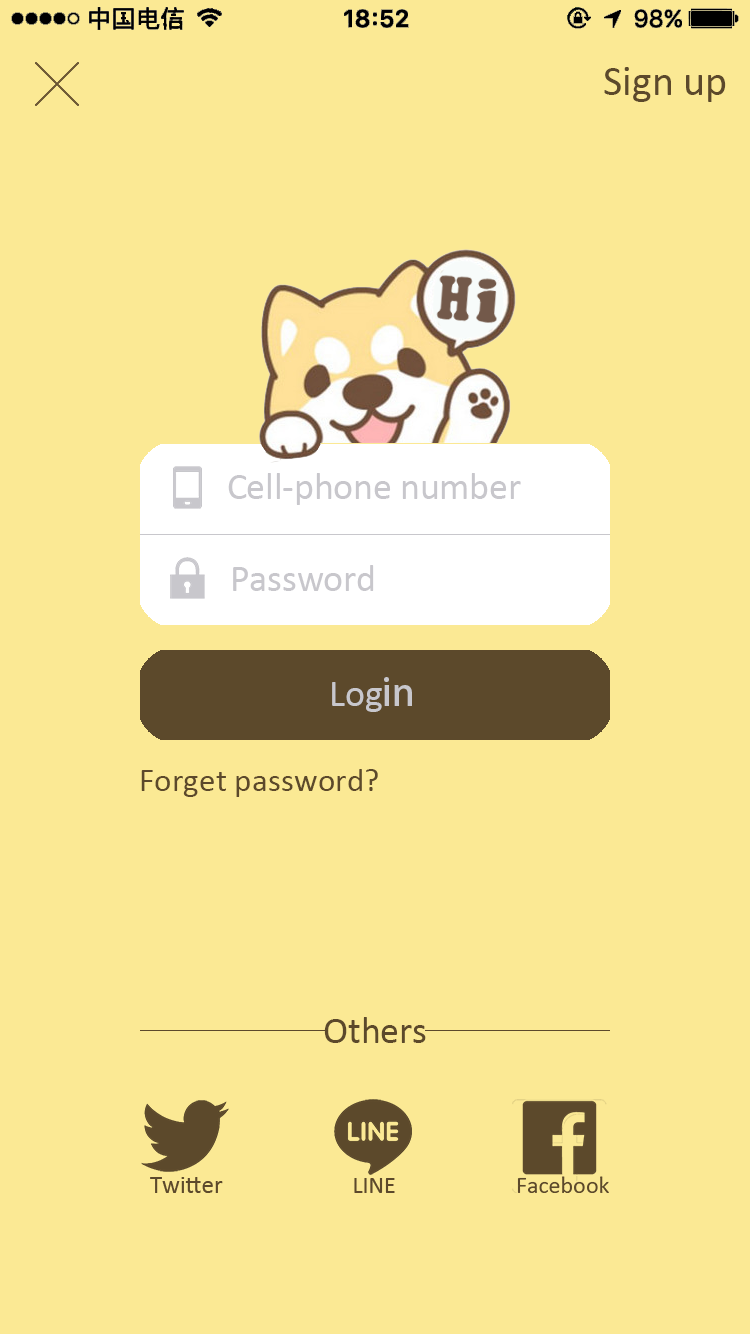
<style>
.page{position:relative;width:750px;height:1334px;background:#fbe994}
.page>*{position:absolute;margin:0}
.t1{font:41.7px "Calibri";color:#5c492b}
.t2{font:37.5px "Calibri";color:#c8c7cc}
.t3{font:37.5px "AdobeHeitiStd-Regular";color:#c8c7cc}
.t4{font:33.3px "Calibri";color:#5c492b}
.t5{font:37.5px "Calibri";color:#5c492b}
</style>
<div class="page">
<p class="t1" style="left:604px;top:67px;width:122px;height:35px">Sign up</p>
<p class="t2" style="left:228px;top:473px;width:293px;height:32px">Cell-phone number</p>
<p class="t2" style="left:233px;top:565px;width:141px;height:26px">Password</p>
<p class="t2" style="left:332px;top:677px;width:80px;height:35px">Log<span class="t3">in</span></p>
<p class="t4" style="left:141px;top:769px;width:237px;height:28px">Forget password?</p>
<p class="t5" style="left:324px;top:1017px;width:102px;height:26px">Others</p>
</div>
